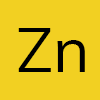
<style>
.page{position:relative;width:100px;height:100px;background:#f2d022}
.page>*{position:absolute;margin:0}
.t1{font:62.5px "Muli-Regular";color:#000000}
</style>
<div class="page">
<p class="t1" style="left:18px;top:28px;width:67px;height:44px">Zn</p>
</div>
